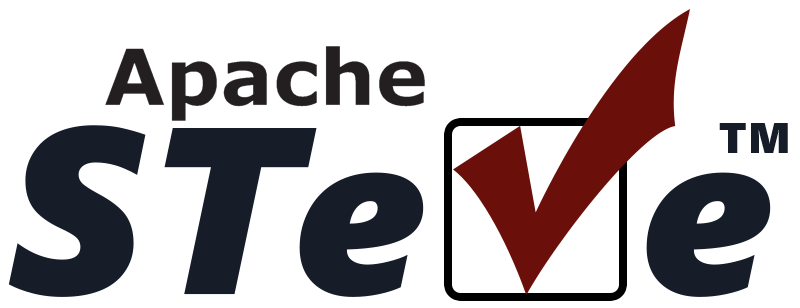
<style>
.page{position:relative;width:800px;height:308px;background:#ffffff}
.page>*{position:absolute;margin:0}
.t1{font:237px "SegoeUIBlack-Italic";letter-spacing:0.025em;color:#161d29}
.t2{font:237px "SegoeUIBlack-Italic";letter-spacing:0.025em;color:#161d29;text-transform:uppercase}
.t3{font:43.1px "SegoeUIBlack";letter-spacing:0.025em;color:#161d29;text-transform:uppercase}
</style>
<div class="page">
<p class="t1" style="left:8px;top:125px;width:763px;height:172px"><span class="t2">st</span>e   e</p>
<p class="t3" style="left:719px;top:123px;width:69px;height:30px">tm</p>
</div>
